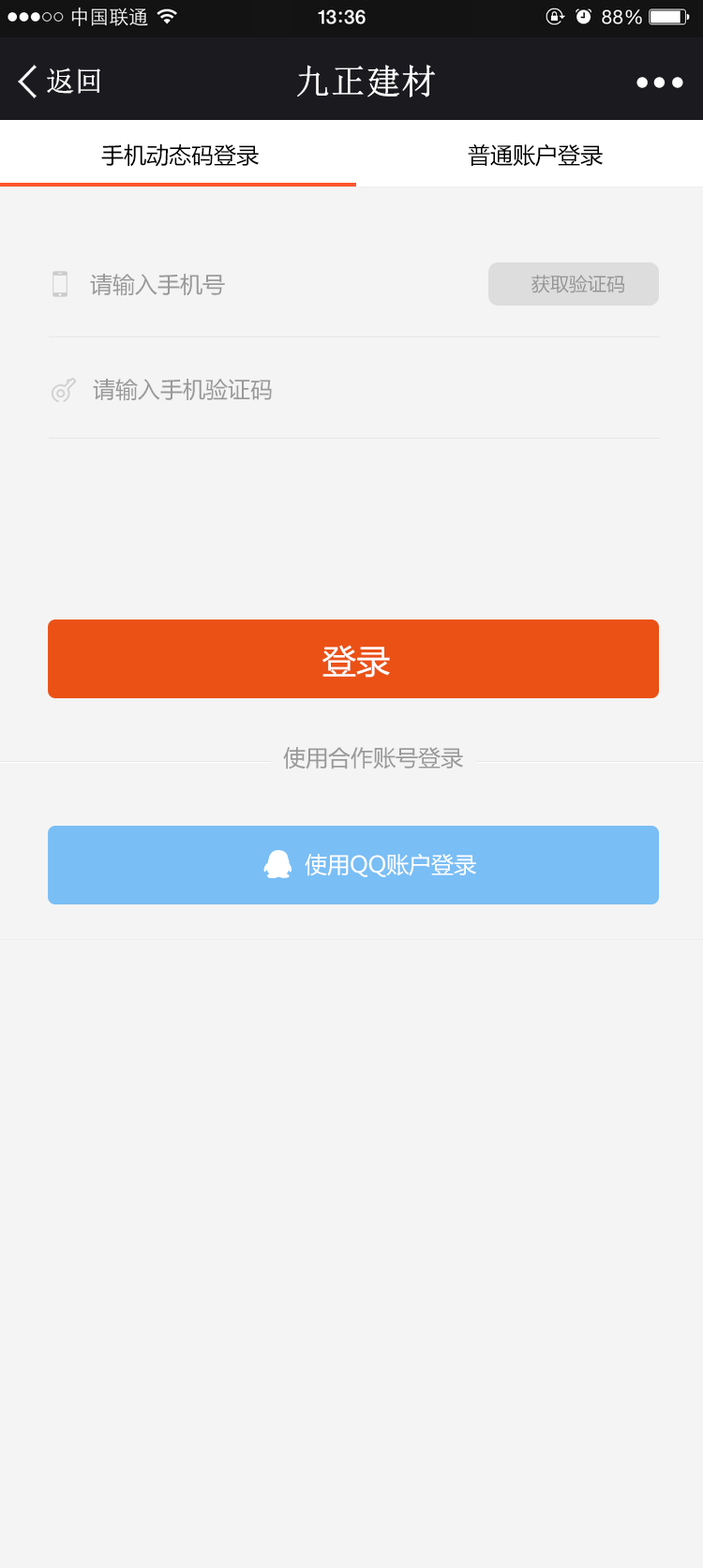
<style>
.page{position:relative;width:703px;height:1568px;background:#f4f4f4}
.page>*{position:absolute;margin:0}
.t1{font:34.4px "NSimSun";color:#ffffff;font-weight:bold}
.t2{font:28.1px "NSimSun";color:#ffffff;font-weight:bold}
.t3{font:22.5px "MicrosoftYaHei";color:#000000}
.t4{font:22.5px "MicrosoftYaHei";color:#999999}
.t5{font:18.7px "MicrosoftYaHei";color:#959595}
.t6{font:33.7px "MicrosoftYaHei";color:#ffffff}
.t7{font:22.5px "MicrosoftYaHei";color:#ffffff}
</style>
<div class="page">
<p class="t1" style="left:297px;top:65px;width:138px;height:32px">九正建材</p>
<p class="t2" style="left:47px;top:67px;width:53px;height:27px">返回</p>
<p class="t3" style="left:101px;top:144px;width:158px;height:23px">手机动态码登录</p>
<p class="t3" style="left:468px;top:143px;width:135px;height:24px">普通账户登录</p>
<p class="t4" style="left:90px;top:274px;width:135px;height:22px">请输入手机号</p>
<p class="t5" style="left:531px;top:275px;width:93px;height:18px">获取验证码</p>
<p class="t4" style="left:93px;top:379px;width:179px;height:22px">请输入手机验证码</p>
<p class="t6" style="left:322px;top:645px;width:68px;height:33px">登录</p>
<p class="t4" style="left:283px;top:747px;width:180px;height:22px">使用合作账号登录</p>
<p class="t7" style="left:305px;top:853px;width:171px;height:24px">使用QQ账户登录</p>
</div>
